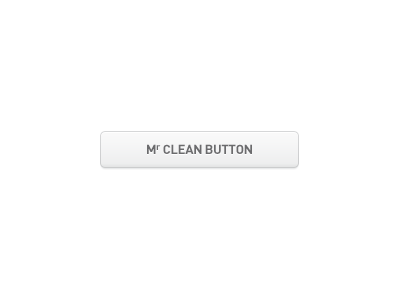
<style>
.page{position:relative;width:400px;height:300px;background:#ffffff}
.page>*{position:absolute;margin:0}
.t1{font:13px "DINPro-Bold";letter-spacing:-0.025em;color:#6b6b6d}
.t2{font:9px "DINPro-Bold";letter-spacing:-0.025em;color:#6b6b6d}
</style>
<div class="page">
<p class="t1" style="left:147px;top:144px;width:105px;height:10px">M<span class="t2">r</span> CLEAN BUTTON</p>
</div>
